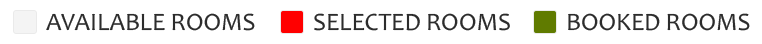
<style>
.page{position:relative;width:762px;height:44px;background:#ffffff}
.page>*{position:absolute;margin:0}
.t1{font:25px "Candara";color:#2c2c2c;text-transform:uppercase}
</style>
<div class="page">
<p class="t1" style="left:46px;top:13px;width:209px;height:18px">available rooms</p>
<p class="t1" style="left:314px;top:13px;width:196px;height:18px">selected rooms</p>
<p class="t1" style="left:568px;top:13px;width:182px;height:18px">Booked rooms</p>
</div>
